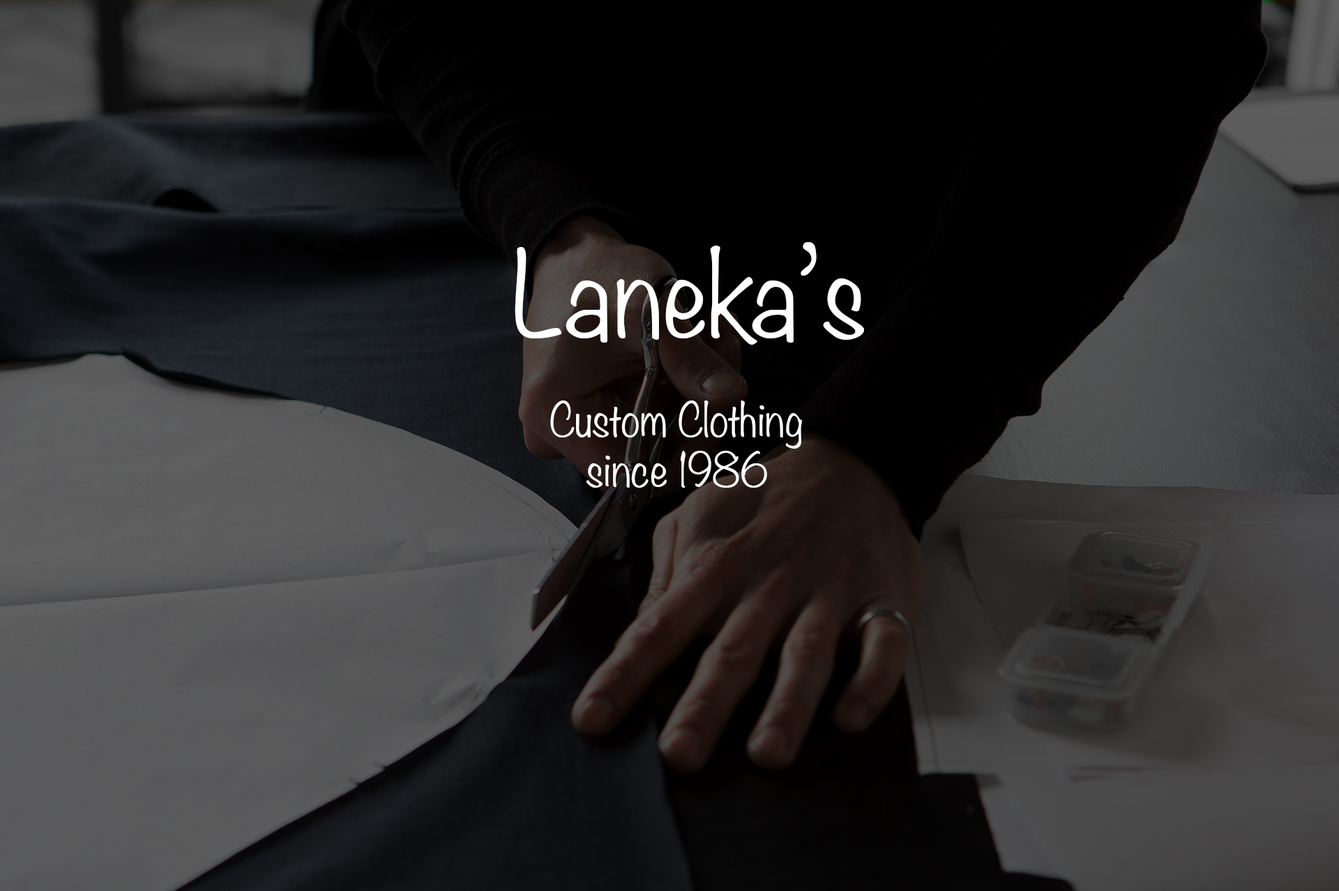
<style>
.page{position:relative;width:1339px;height:891px}
.page>*{position:absolute;margin:0}
.t1{font:105.9px "Noteworthy-Light";color:#ffffff}
.t2{font:41.8px "Noteworthy-Light";color:#ffffff}
</style>
<div class="page">
<p class="t1" style="left:515px;top:242px;width:350px;height:103px">Laneka’s</p>
<p class="t2" style="left:550px;top:400px;width:252px;height:87px;text-align:center">Custom Clothing since 1986</p>
</div>
